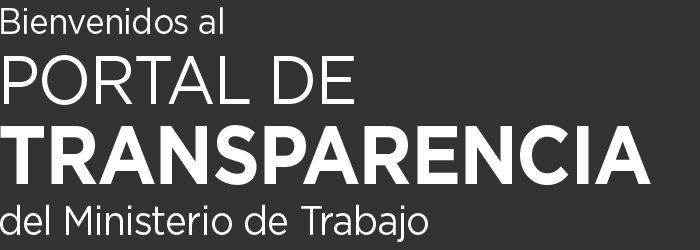
<style>
.page{position:relative;width:700px;height:250px;background:#333333}
.page>*{position:absolute;margin:0}
.t1{font:36.7px "Gotham-Book";letter-spacing:-0.025em;color:#ffffff;scale:0.91 1}
.t2{font:68.8px "Gotham-Book";letter-spacing:-0.025em;color:#ffffff;text-transform:uppercase;scale:0.91 1}
.t3{font:82.5px "Gotham-Bold";letter-spacing:-0.025em;color:#fffefe;text-transform:uppercase;scale:0.91 1}
.t4{font:41.2px "Gotham-Book";letter-spacing:-0.025em;color:#ffffff;scale:0.91 1}
</style>
<div class="page">
<p class="t1" style="left:1px;top:7px;width:222px;height:27px">Bienvenidos al</p>
<p class="t2" style="left:4px;top:55px;width:350px;height:50px">PORTAL DE</p>
<p class="t3" style="left:0px;top:125px;width:651px;height:60px">TRANSPARENCIA</p>
<p class="t4" style="left:0px;top:204px;width:428px;height:38px">del Ministerio de Trabajo</p>
</div>
